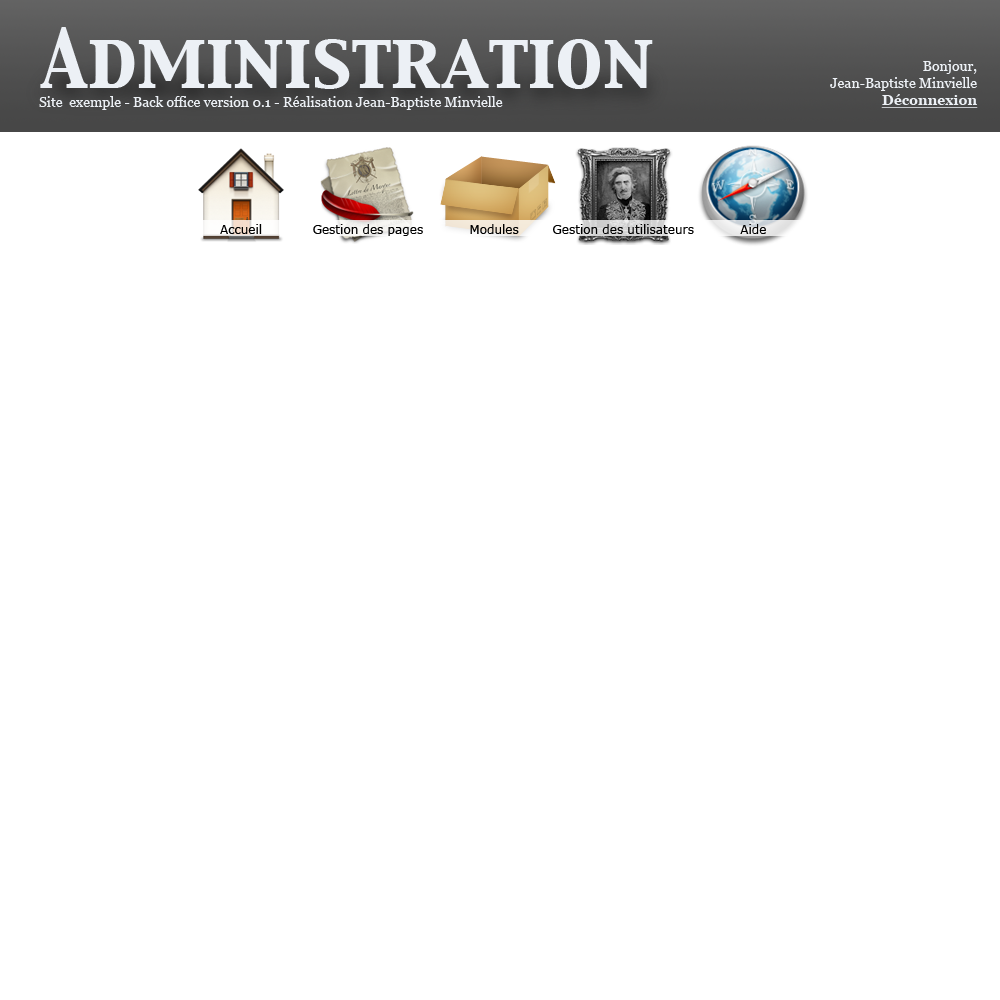
<style>
.page{position:relative;width:1000px;height:1000px;background:#ffffff}
.page>*{position:absolute;margin:0}
.t1{font:72px "CapitalsRegular";color:#ecf0f5}
.t2{font:14px "Georgia";color:#ecf0f5}
.t3{font:14px "Georgia-Bold";color:#ecf0f5;text-decoration:underline}
.t4{font:12px "Verdana";color:#000000}
</style>
<div class="page">
<p class="t1" style="left:40px;top:27px;width:613px;height:62px">Administration</p>
<p class="t2" style="left:830px;top:60px;width:148px;height:48px;text-align:right">Bonjour,<br>Jean-Baptiste Minvielle<br><span class="t3">Déconnexion</span></p>
<p class="t2" style="left:39px;top:96px;width:464px;height:14px">Site  exemple - Back office version 0.1 - Réalisation Jean-Baptiste Minvielle</p>
<p class="t4" style="left:220px;top:224px;width:546px;height:12px">Accueil            Gestion des pages           Modules        Gestion des utilisateurs           Aide</p>
</div>
